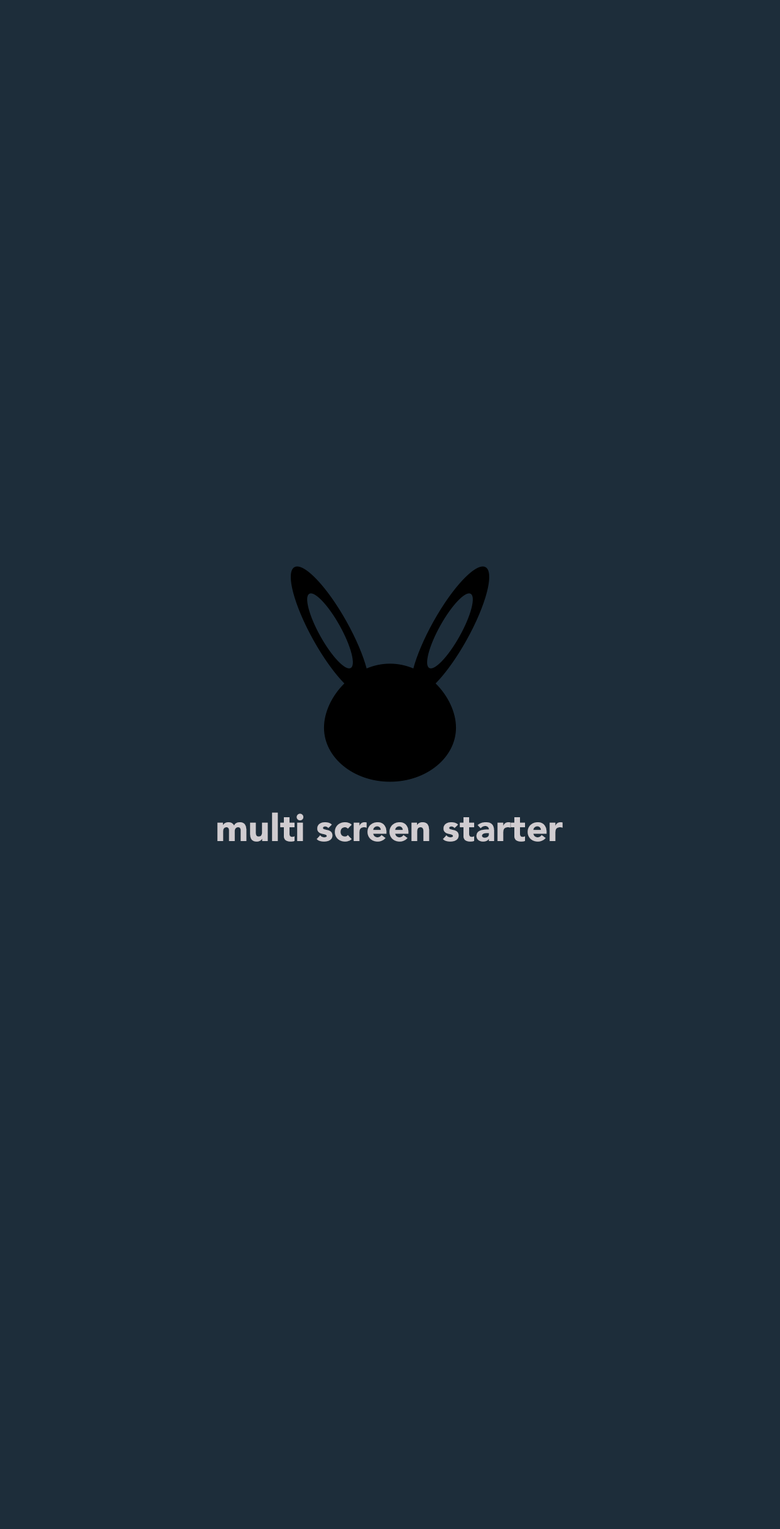
<style>
.page{position:relative;width:780px;height:1529px;background:#1d2d3a}
.page>*{position:absolute;margin:0}
.t1{font:37.7px "Avenir-Black";color:#d0ccd0}
</style>
<div class="page">
<p class="t1" style="left:217px;top:812px;width:346px;height:30px">multi screen starter</p>
</div>
